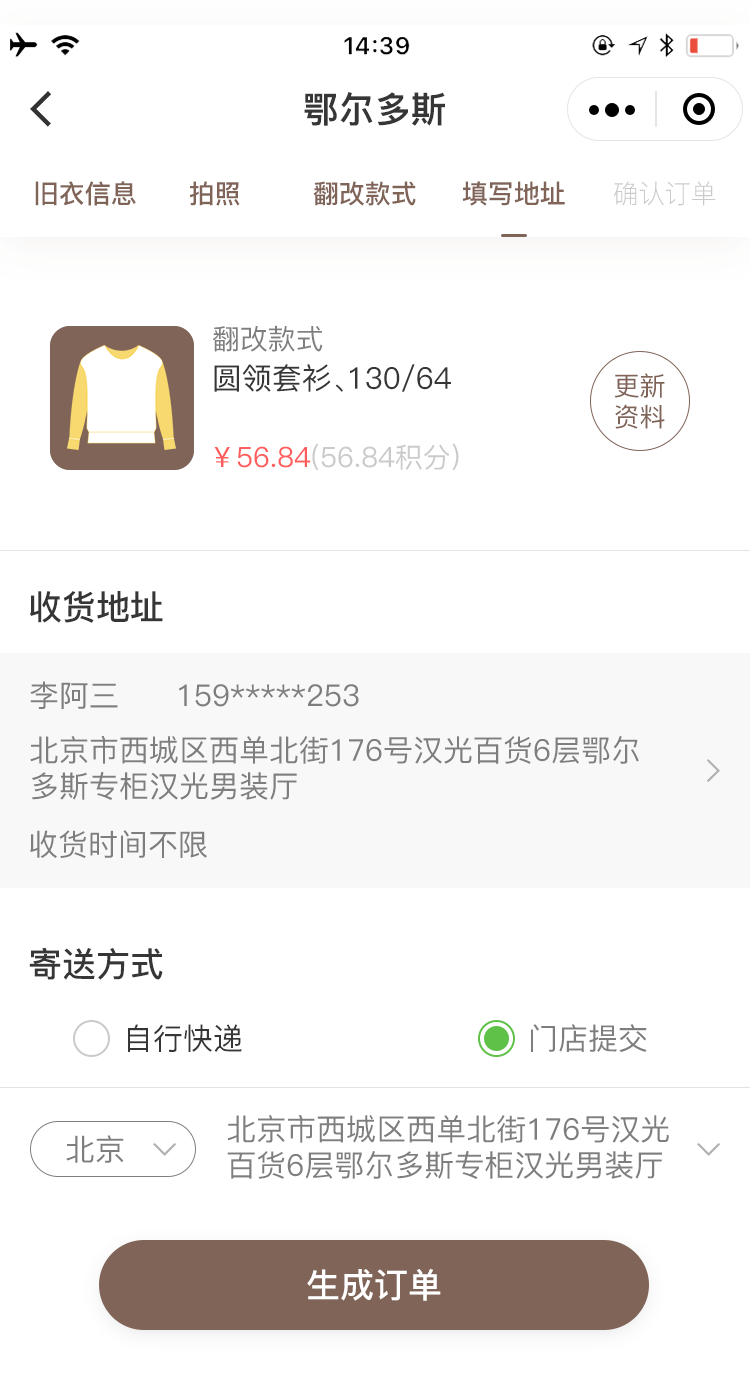
<style>
.page{position:relative;width:750px;height:1385px;background:#ffffff}
.page>*{position:absolute;margin:0}
.t1{font:36px "PingFang-SC-Heavy";color:#363636}
.t2{font:26px "PingFang-SC-Bold";color:#806458}
.t3{font:26px "PingFang-SC-Light";color:#cacaca}
.t4{font:28px "PingFang-SC-Medium";color:#7e7e7e}
.t5{font:30px "PingFang-SC-Medium";color:#363636}
.t6{font:26px "PingFang-SC-Medium";color:#806458}
.t7{font:28px "PingFang-SC-Medium";color:#cacaca}
.t8{font:28px "PingFang-SC-Medium";color:#ff5d5d}
.t9{font:34px "PingFang-SC-Bold";color:#363636}
.t10{font:30px "PingFang-SC-Medium";color:#7e7e7e}
.t11{font:34px "PingFang-SC-Bold";color:#ffffff}
</style>
<div class="page">
<p class="t1" style="left:304px;top:92px;width:141px;height:34px">鄂尔多斯</p>
<p class="t2" style="left:35px;top:181px;width:101px;height:25px">旧衣信息</p>
<p class="t2" style="left:189px;top:181px;width:51px;height:25px">拍照</p>
<p class="t2" style="left:313px;top:181px;width:103px;height:25px">翻改款式</p>
<p class="t2" style="left:462px;top:181px;width:103px;height:25px">填写地址</p>
<p class="t3" style="left:613px;top:181px;width:103px;height:25px">确认订单</p>
<p class="t4" style="left:213px;top:325px;width:110px;height:27px">翻改款式</p>
<p class="t5" style="left:214px;top:364px;width:237px;height:28px">圆领套衫、130/64</p>
<p class="t6" style="left:614px;top:373px;width:51px;height:56px">更新<br>资料</p>
<p class="t7" style="left:214px;top:443px;width:245px;height:27px"><span class="t8">￥56.84</span>(56.84积分)</p>
<p class="t9" style="left:30px;top:591px;width:133px;height:32px">收货地址</p>
<p class="t10" style="left:30px;top:681px;width:88px;height:28px">李阿三</p>
<p class="t10" style="left:179px;top:684px;width:180px;height:23px">159*****253</p>
<p class="t10" style="left:30px;top:736px;width:609px;height:64px">北京市西城区西单北街176号汉光百货6层鄂尔多斯专柜汉光男装厅</p>
<p class="t10" style="left:30px;top:830px;width:177px;height:28px">收货时间不限</p>
<p class="t9" style="left:29px;top:947px;width:134px;height:33px">寄送方式</p>
<p class="t5" style="left:128px;top:1024px;width:114px;height:28px">自行快递</p>
<p class="t10" style="left:531px;top:1024px;width:116px;height:28px">门店提交</p>
<p class="t10" style="left:227px;top:1115px;width:442px;height:64px">北京市西城区西单北街176号汉光百货6层鄂尔多斯专柜汉光男装厅</p>
<p class="t10" style="left:66px;top:1135px;width:58px;height:28px">北京</p>
<p class="t11" style="left:307px;top:1268px;width:134px;height:33px">生成订单</p>
</div>
